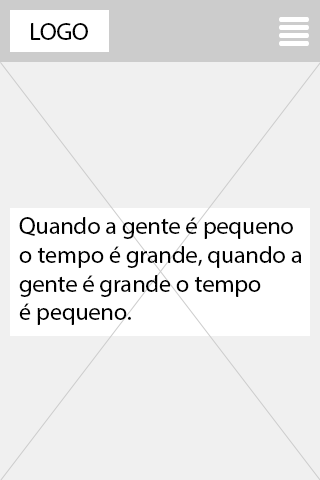
<style>
.page{position:relative;width:320px;height:480px;background:#f0f0f0}
.page>*{position:absolute;margin:0}
.t1{font:12px "MyriadPro-Regular";color:#000000}
</style>
<div class="page">
<p class="t1" style="left:31px;top:23px;width:57px;height:17px">LOGO</p>
<p class="t1" style="left:19px;top:217px;width:283px;height:108px">Quando a gente é pequeno<br>o tempo é grande, quando a<br>gente é grande o tempo<br>é pequeno.</p>
</div>
